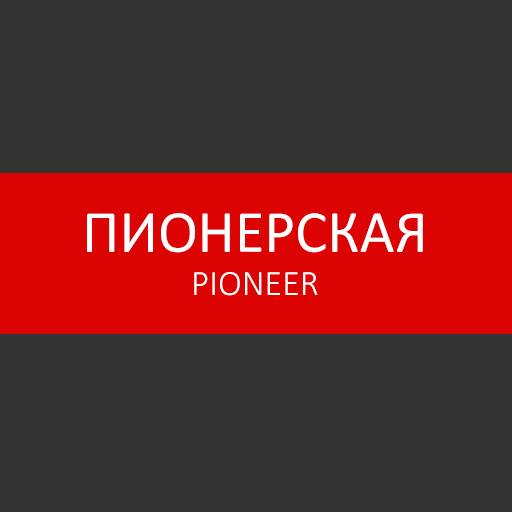
<style>
.page{position:relative;width:512px;height:512px;background:#333333}
.page>*{position:absolute;margin:0}
.t1{font:60px "Calibri";color:#ffffff}
.t2{font:36px "Calibri-Light";color:#ffffff}
</style>
<div class="page">
<p class="t1" style="left:87px;top:213px;width:336px;height:83px;text-align:center">ПИОНЕРСКАЯ<br><span class="t2">PIONEER</span></p>
</div>
